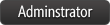
<style>
.page{position:relative;width:110px;height:25px}
.page>*{position:absolute;margin:0}
.t1{font:16px "SegoeCondensed";color:#ffffff}
</style>
<div class="page">
<p class="t1" style="left:18px;top:5px;width:75px;height:13px">Adminstrator</p>
</div>
